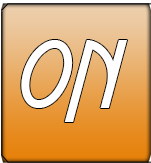
<style>
.page{position:relative;width:151px;height:163px}
.page>*{position:absolute;margin:0}
.t1{font:100px "AeroviasBrasilNF";color:#ffffff}
</style>
<div class="page">
<p class="t1" style="left:21px;top:40px;width:106px;height:82px">ON</p>
</div>
